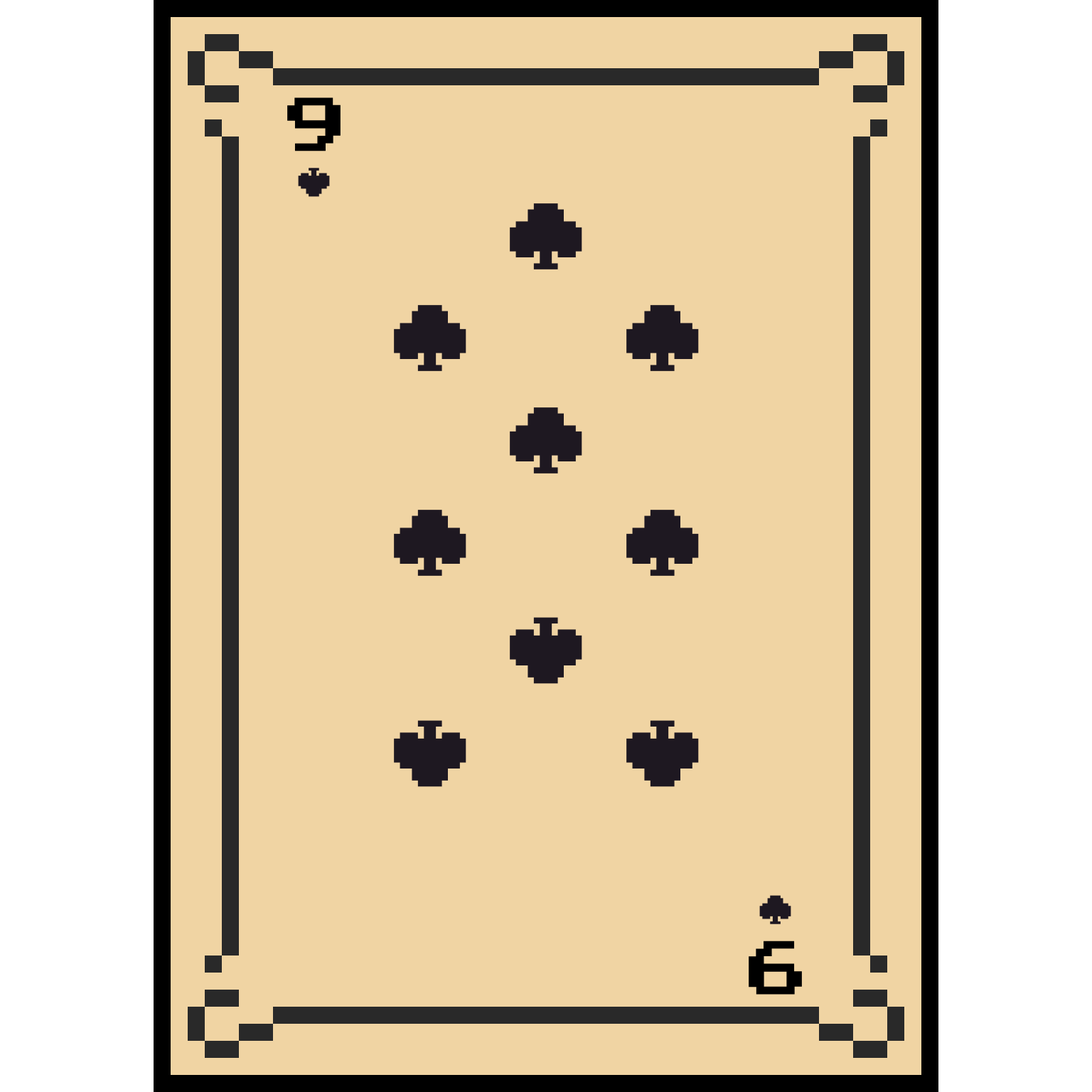
<style>
.page{position:relative;width:1092px;height:1092px;background:#f0d4a3}
.page>*{position:absolute;margin:0}
.t1{font:106.6px "ArcadeClassic";color:#000000}
</style>
<div class="page">
<p class="t1" style="left:287px;top:97px;width:54px;height:54px">9</p>
<p class="t1" style="left:749px;top:941px;width:53px;height:54px;rotate:180deg">9</p>
</div>
